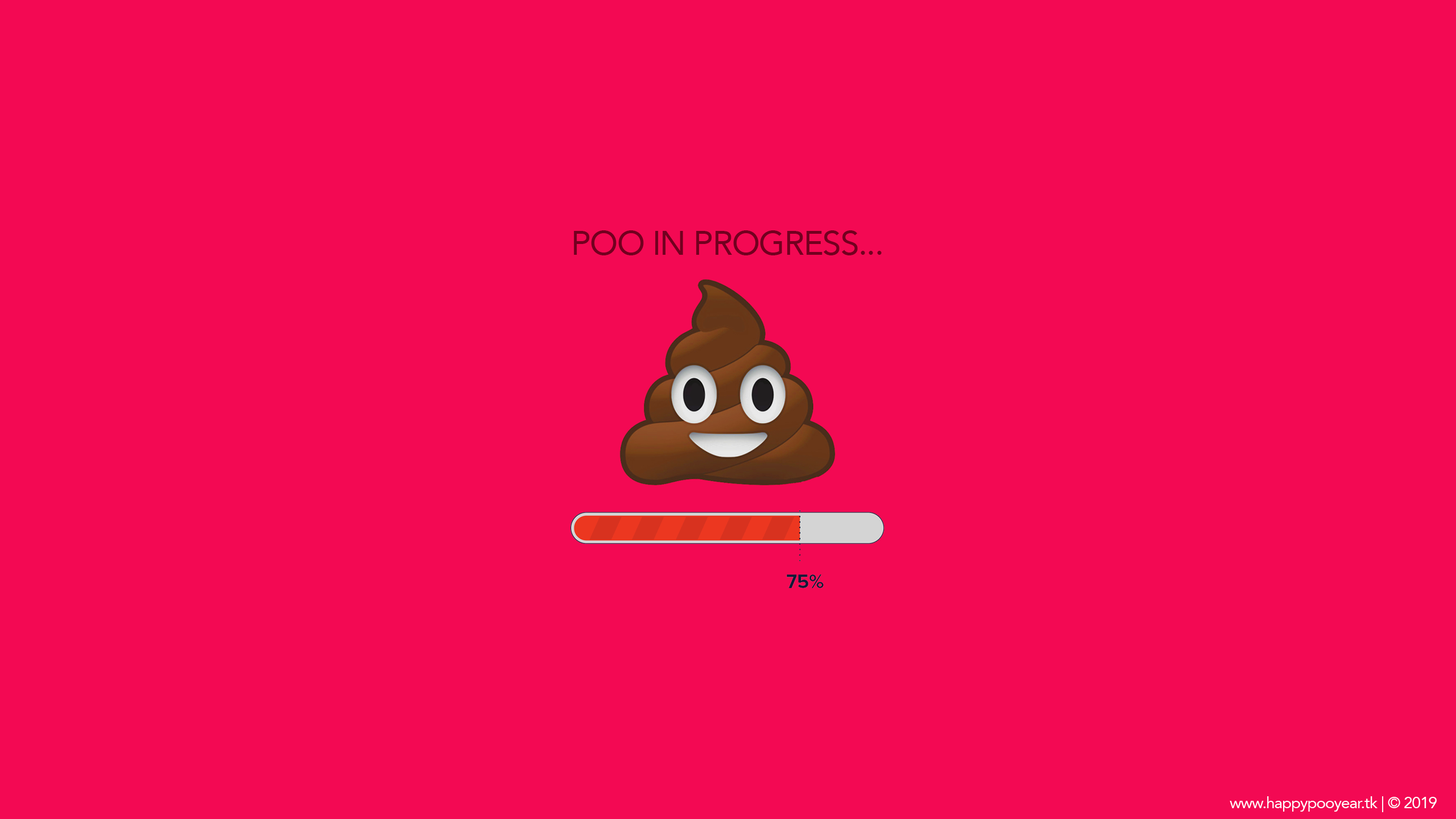
<style>
.page{position:relative;width:1456px;height:819px;background:#f30953}
.page>*{position:absolute;margin:0}
.t1{font:33.8px "Avenir-Roman";letter-spacing:-0.032em;color:#72001f}
.t2{font:15.7px "Avenir-Roman";letter-spacing:-0.032em;color:#ffffff}
</style>
<div class="page">
<p class="t1" style="left:574px;top:230px;width:308px;height:25px">POO IN PROGRESS...</p>
<p class="t2" style="left:1230px;top:796px;width:207px;height:16px">www.happypooyear.tk | © 2019</p>
</div>
